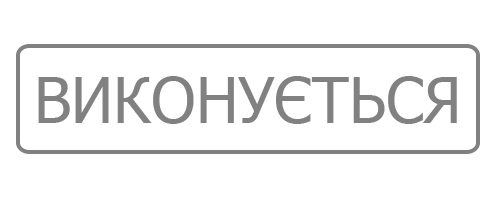
<style>
.page{position:relative;width:490px;height:200px;background:#ffffff}
.page>*{position:absolute;margin:0}
.t1{font:63.2px "Tahoma";color:#818181}
</style>
<div class="page">
<p class="t1" style="left:38px;top:76px;width:419px;height:48px">ВИКОНУЄТЬСЯ</p>
</div>
